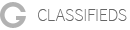
<style>
.page{position:relative;width:130px;height:30px;background:#ffffff}
.page>*{position:absolute;margin:0}
.t1{font:18px "SourceSansPro-ExtraLight";color:#676767;text-transform:uppercase}
</style>
<div class="page">
<p class="t1" style="left:38px;top:9px;width:89px;height:12px">CLASSIFIEDS</p>
</div>
